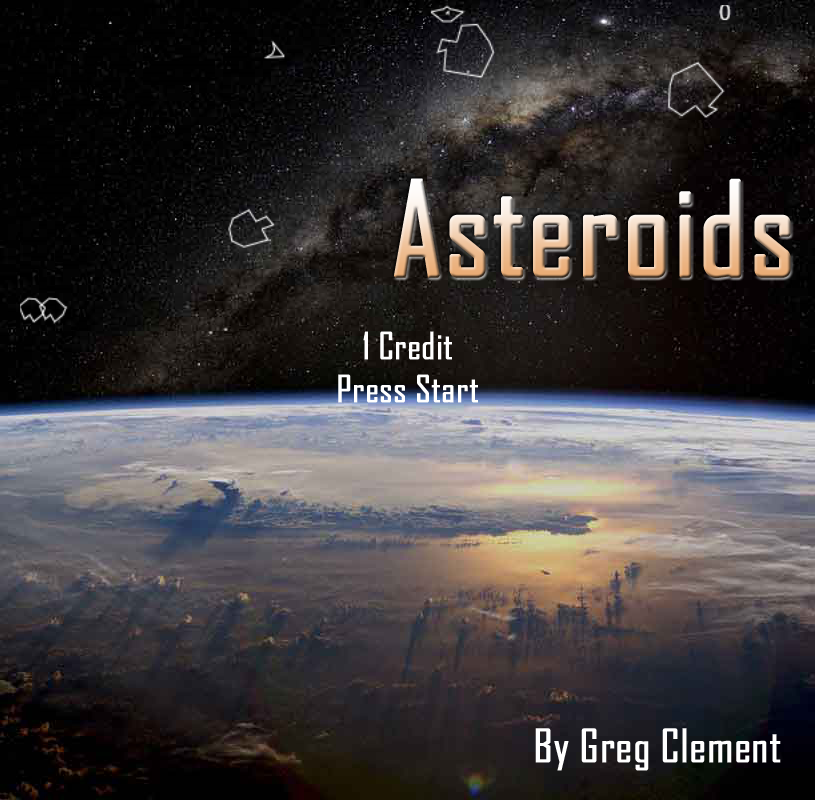
<style>
.page{position:relative;width:815px;height:800px}
.page>*{position:absolute;margin:0}
.t1{font:125px "AgencyFB-Reg";font-weight:bold}
.t2{font:36px "AgencyFB-Reg";color:#ffffff;font-weight:bold}
.t3{font:44px "AgencyFB-Reg";color:#ffffff;font-weight:bold}
</style>
<div class="page">
<p class="t1" style="left:394px;top:178px;width:397px;height:100px">Asteroids</p>
<p class="t2" style="left:338px;top:331px;width:140px;height:72px;text-align:center">1 Credit <br>Press Start</p>
<p class="t3" style="left:535px;top:728px;width:246px;height:43px">By Greg Clement</p>
</div>
